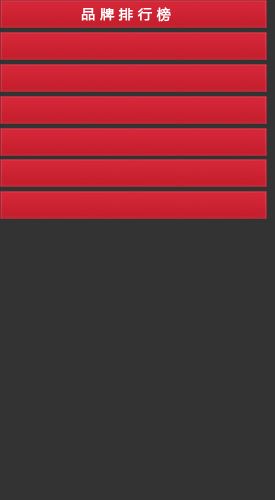
<style>
.page{position:relative;width:275px;height:500px;background:#333333}
.page>*{position:absolute;margin:0}
.t1{font:14px "MicrosoftYaHei";color:#ffffff;text-transform:uppercase;font-weight:bold}
</style>
<div class="page">
<p class="t1" style="left:81px;top:7px;width:90px;height:15px">品 牌 排 行 榜</p>
</div>
